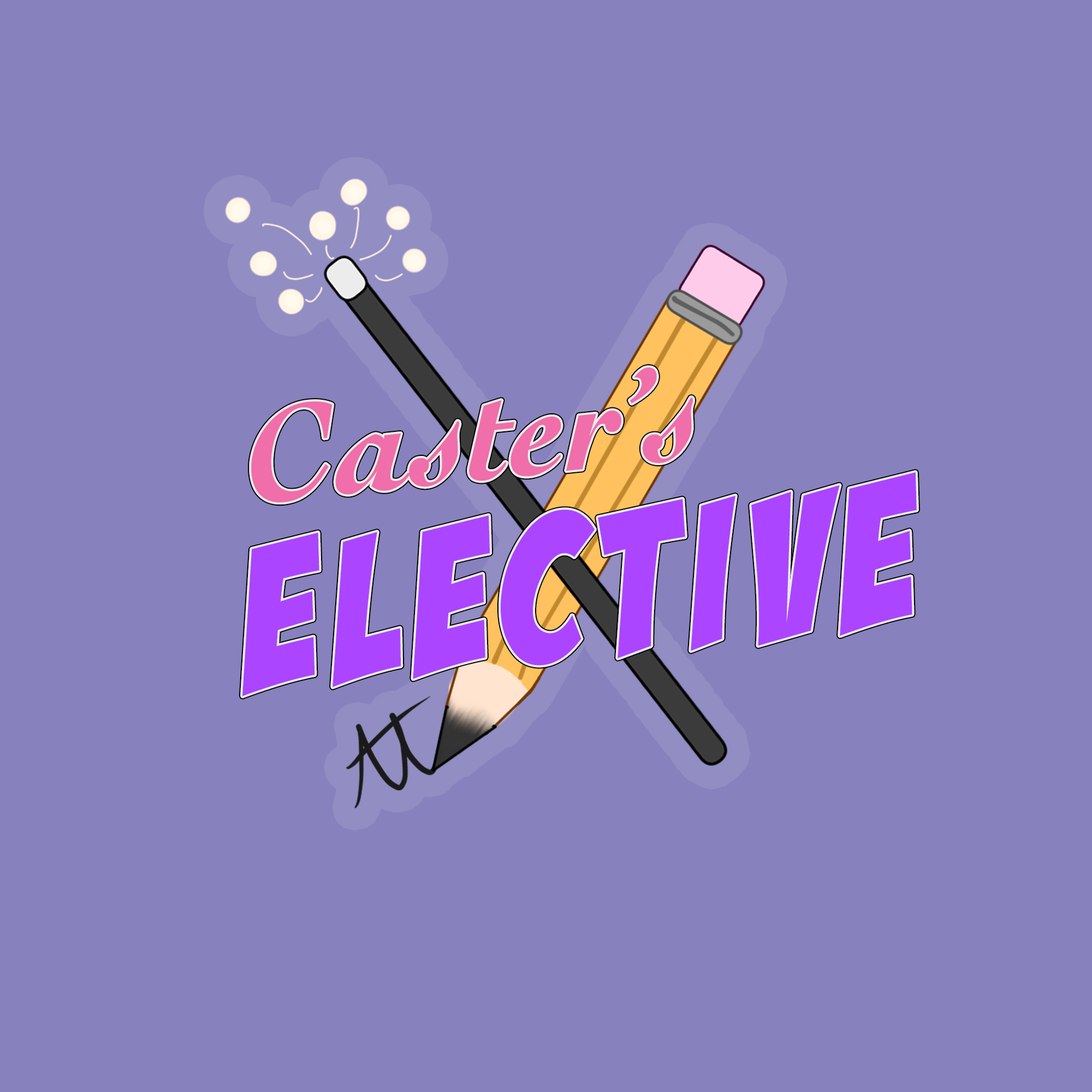
<style>
.page{position:relative;width:1092px;height:1092px;background:#8781bd}
.page>*{position:absolute;margin:0}
.t1{font:140.9px "Cochin-BoldItalic";color:#f06eaa}
.t2{font:207.5px "BadaBoomBB";letter-spacing:0.07em;color:#ab45ff}
</style>
<div class="page">
<p class="t1" style="left:251px;top:367px;width:442px;height:135px;rotate:-6deg">Caster’s</p>
<p class="t2" style="left:242px;top:472px;width:675px;height:224px;rotate:-6deg">Elective</p>
</div>
